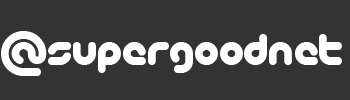
<style>
.page{position:relative;width:350px;height:100px;background:#333333}
.page>*{position:absolute;margin:0}
.t1{font:45.2px "PicoBlack";color:#ffffff}
</style>
<div class="page">
<p class="t1" style="left:1px;top:31px;width:341px;height:45px">@supergoodnet</p>
</div>
